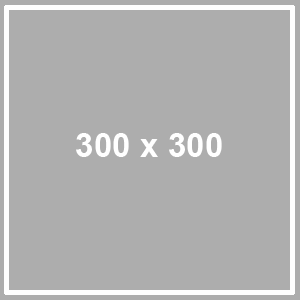
<style>
.page{position:relative;width:300px;height:300px;background:#adadad}
.page>*{position:absolute;margin:0}
.t1{font:33.3px "Arial-BoldMT";color:#ffffff}
</style>
<div class="page">
<p class="t1" style="left:76px;top:133px;width:146px;height:24px">300 x 300</p>
</div>
